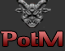
<style>
.page{position:relative;width:65px;height:51px;background:#333333}
.page>*{position:absolute;margin:0}
.t1{font:19px "KingRichard-Regular";scale:1.71 1}
</style>
<div class="page">
<p class="t1" style="left:1px;top:31px;width:62px;height:16px">PotM</p>
</div>
